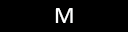
<style>
.page{position:relative;width:128px;height:32px;background:#000000}
.page>*{position:absolute;margin:0}
.t1{font:24px "Calibri";color:#feffff}
</style>
<div class="page">
<p class="t1" style="left:55px;top:8px;width:18px;height:15px">M</p>
</div>
